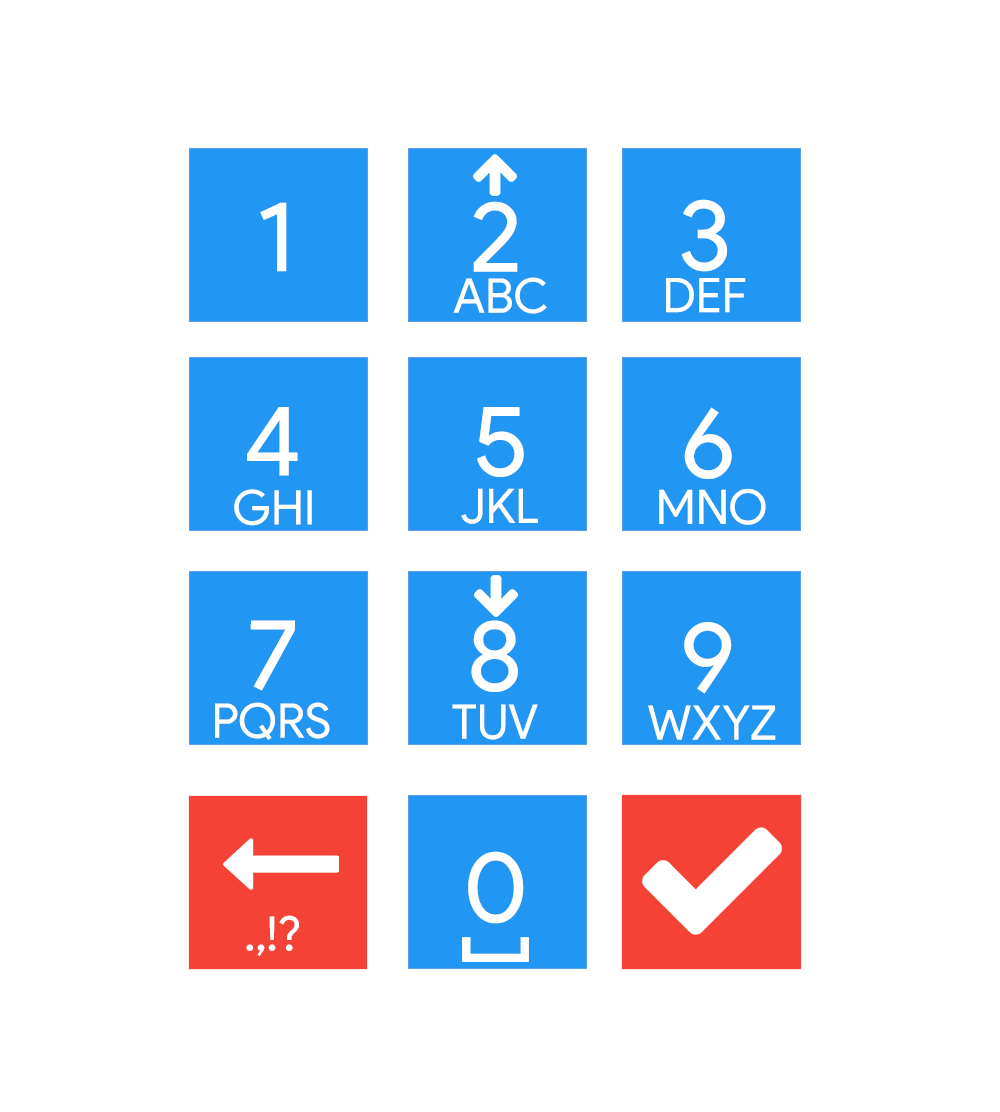
<style>
.page{position:relative;width:1000px;height:1112px;background:#ffffff}
.page>*{position:absolute;margin:0}
.t1{font:100px "ProductSans-Regular";color:#ffffff}
.t2{font:48px "ProductSans-Regular";color:#ffffff}
</style>
<div class="page">
<p class="t1" style="left:260px;top:202px;width:27px;height:70px">1</p>
<p class="t1" style="left:473px;top:201px;width:45px;height:71px">2</p>
<p class="t1" style="left:681px;top:199px;width:46px;height:73px">3</p>
<p class="t2" style="left:453px;top:277px;width:94px;height:37px">ABC</p>
<p class="t2" style="left:666px;top:278px;width:80px;height:35px">DEF</p>
<p class="t1" style="left:247px;top:407px;width:51px;height:69px">4</p>
<p class="t1" style="left:477px;top:407px;width:47px;height:70px">5</p>
<p class="t1" style="left:684px;top:407px;width:48px;height:72px">6</p>
<p class="t2" style="left:234px;top:489px;width:78px;height:37px">GHI</p>
<p class="t2" style="left:461px;top:488px;width:77px;height:36px">JKL</p>
<p class="t2" style="left:659px;top:488px;width:107px;height:37px">MNO</p>
<p class="t1" style="left:250px;top:620px;width:45px;height:71px">7</p>
<p class="t1" style="left:471px;top:620px;width:47px;height:72px">8</p>
<p class="t1" style="left:684px;top:622px;width:48px;height:72px">9</p>
<p class="t2" style="left:215px;top:702px;width:115px;height:38px">PQRS</p>
<p class="t2" style="left:452px;top:704px;width:86px;height:36px">TUV</p>
<p class="t2" style="left:648px;top:705px;width:128px;height:35px">WXYZ</p>
<p class="t1" style="left:468px;top:851px;width:56px;height:73px">0</p>
<p class="t2" style="left:246px;top:915px;width:53px;height:41px">.,!?</p>
</div>
